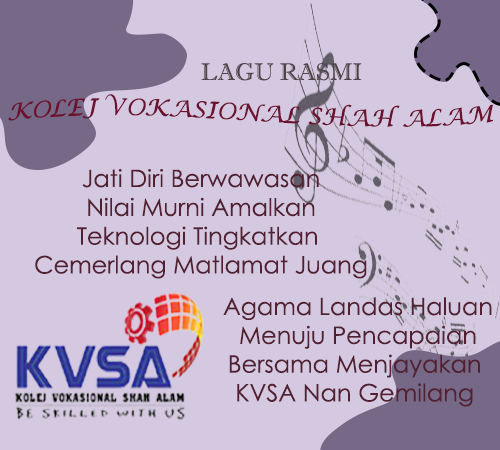
<style>
.page{position:relative;width:500px;height:450px;background:#d5c9e2}
.page>*{position:absolute;margin:0}
.t1{font:24px "ImprintMT-Shadow";color:#504347}
.t2{font:24px "LucidaCalligraphy-Italic";color:#6c112e}
.t3{font:24px "CenturyGothic";color:#522030}
</style>
<div class="page">
<p class="t1" style="left:201px;top:63px;width:161px;height:18px">LAGU RASMI</p>
<p class="t2" style="left:8px;top:94px;width:485px;height:33px">KOLEJ VOKASIONAL SHAH ALAM</p>
<p class="t3" style="left:35px;top:169px;width:332px;height:110px;text-align:center">Jati Diri Berwawasan<br>Nilai Murni Amalkan<br>Teknologi Tingkatkan <br>Cemerlang Matlamat Juang</p>
<p class="t3" style="left:223px;top:297px;width:269px;height:110px;text-align:center">Agama Landas Haluan<br>Menuju Pencapaian<br>Bersama Menjayakan <br>KVSA Nan Gemilang</p>
</div>
